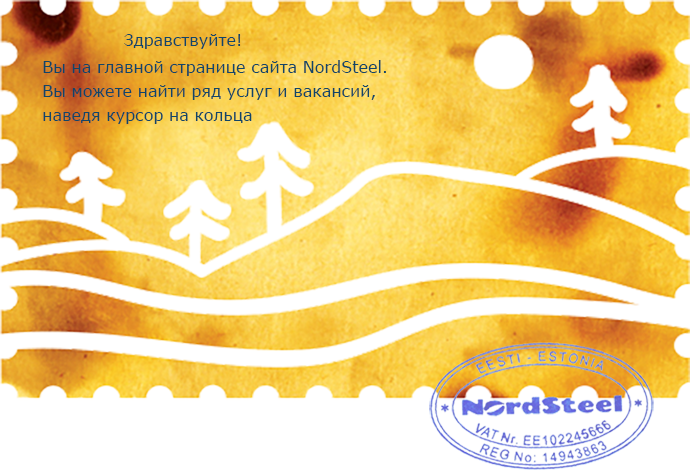
<style>
.page{position:relative;width:690px;height:470px;background:#ffffff}
.page>*{position:absolute;margin:0}
.t1{font:16px "Verdana";color:#124568}
.t2{font:16px/24px "Verdana";color:#124568}
</style>
<div class="page">
<p class="t1" style="left:124px;top:34px;width:117px;height:15px">Здравствуйте!</p>
<p class="t2" style="left:43px;top:60px;width:343px;height:64px">Вы на главной странице сайта NordSteel.<br>Вы можете найти ряд услуг и вакансий,<br>наведя курсор на кольца</p>
</div>
